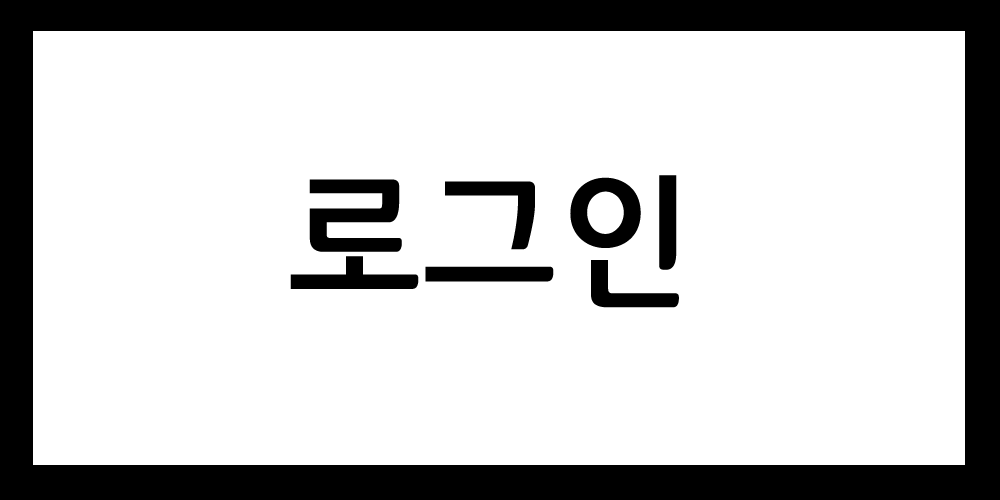
<style>
.page{position:relative;width:1000px;height:500px;background:#ffffff}
.page>*{position:absolute;margin:0}
.t1{font:150px "12LotteMartDreamBold";color:#000000}
</style>
<div class="page">
<p class="t1" style="left:290px;top:175px;width:389px;height:133px">로그인</p>
</div>
